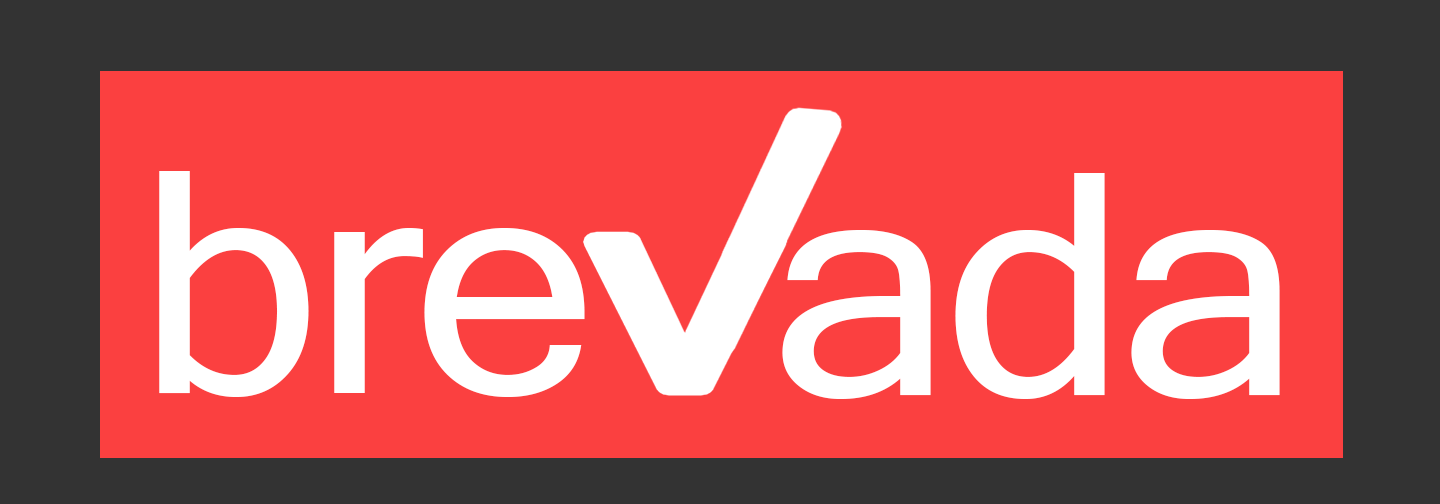
<style>
.page{position:relative;width:1440px;height:504px;background:#fb4040}
.page>*{position:absolute;margin:0}
.t1{font:310.2px "MicrosoftSansSerif";letter-spacing:-0.025em;color:#ffffff;scale:1.06 1}
</style>
<div class="page">
<p class="t1" style="left:159px;top:171px;width:426px;height:226px">bre</p>
<p class="t1" style="left:782px;top:173px;width:498px;height:226px">ada</p>
</div>
